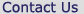
<style>
.page{position:relative;width:84px;height:14px;background:#dedede}
.page>*{position:absolute;margin:0}
.t1{font:14px "Verdana";color:#292765}
</style>
<div class="page">
<p class="t1" style="left:2px;top:1px;width:76px;height:12px">Contact Us</p>
</div>
